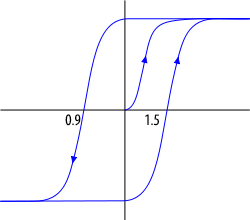
<style>
.page{position:relative;width:250px;height:220px;background:#ffffff}
.page>*{position:absolute;margin:0}
.t1{font:16px "MyriadPro-Cond";color:#000000}
</style>
<div class="page">
<p class="t1" style="left:65px;top:114px;width:16px;height:12px">0.9</p>
<p class="t1" style="left:145px;top:114px;width:14px;height:12px">1.5</p>
</div>
